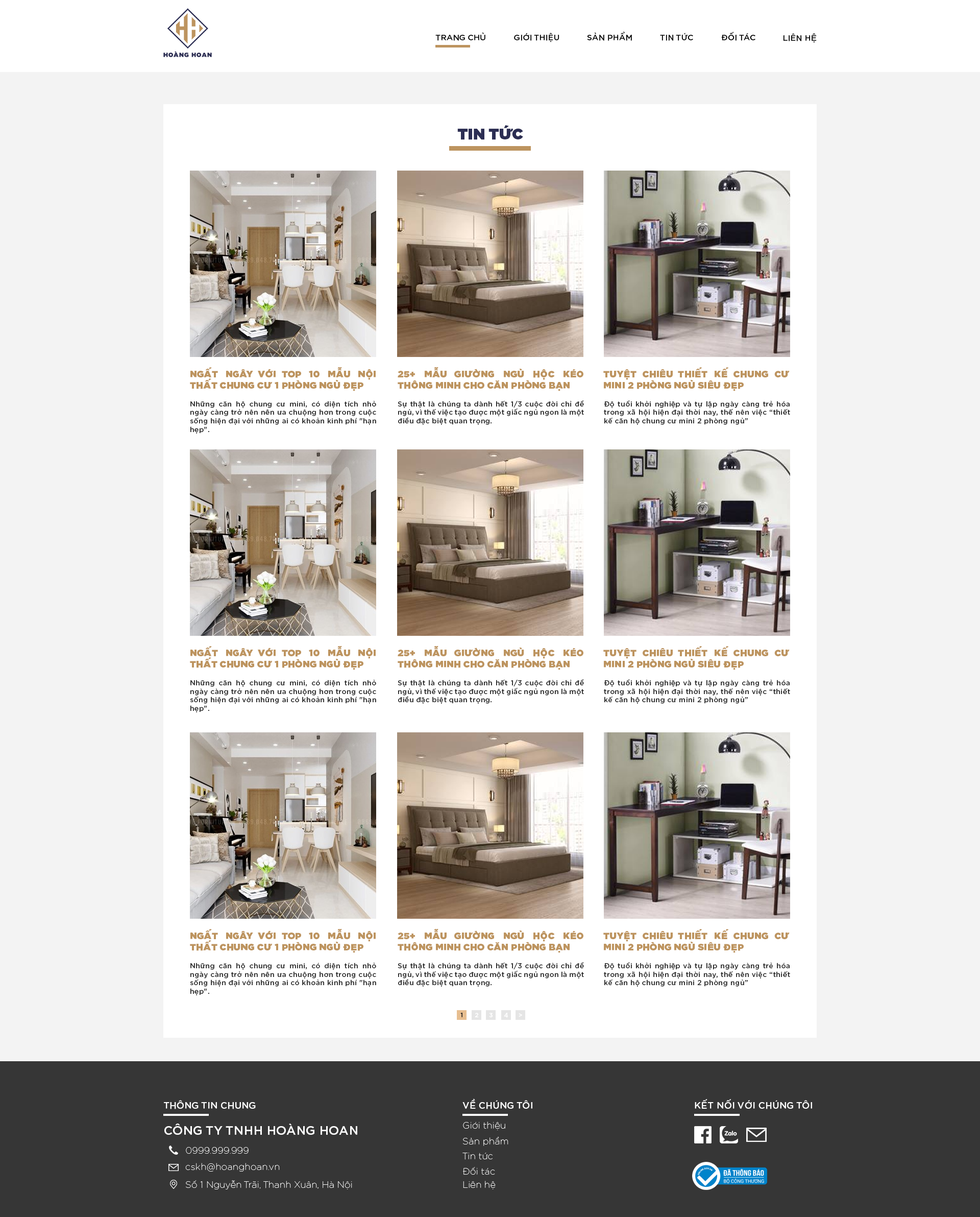
<style>
.page{position:relative;width:980px;height:1217px;background:#f3f3f3}
.page>*{position:absolute;margin:0}
.t1{font:8.2px "iCielGotham-Medium";color:#000000;text-transform:uppercase}
.t2{font:15.5px "iCielGotham-Ultra";letter-spacing:0.025em;color:#2c2e53;text-transform:uppercase}
.t3{font:9.2px "iCielGotham-Ultra";letter-spacing:0.025em;color:#bd945f}
.t4{font:7.1px "iCielGotham-Medium";letter-spacing:0.025em;color:#222222}
.t5{font:6.1px "iCielGotham-Medium";color:#222222}
.t6{font:6.1px "iCielGotham-Medium";color:#ffffff}
.t7{font:9.2px "iCielGotham-Medium";letter-spacing:0.025em;color:#ffffff}
.t8{font:9.2px "iCielGotham-Thin";letter-spacing:0.025em;color:#ffffff}
.t9{font:12.3px "iCielGotham-Medium";letter-spacing:0.025em;color:#ffffff}
</style>
<div class="page">
<p class="t1" style="left:435px;top:32px;width:50px;height:9px">trang chủ</p>
<p class="t1" style="left:514px;top:33px;width:46px;height:9px">gIớI thIệu</p>
<p class="t1" style="left:587px;top:32px;width:45px;height:9px">sản phẩm</p>
<p class="t1" style="left:660px;top:33px;width:33px;height:8px">tIn tức</p>
<p class="t1" style="left:721px;top:32px;width:35px;height:9px">đốI tác</p>
<p class="t1" style="left:783px;top:33px;width:34px;height:10px">lIên hệ</p>
<p class="t2" style="left:457px;top:125px;width:66px;height:15px">tIn tức</p>
<p class="t3" style="left:190px;top:367px;width:186px;height:24px;text-align:justify">NGẤT NGÂY VỚI TOP 10 MẪU NỘI THẤT CHUNG CƯ 1 PHÒNG NGỦ ĐẸP</p>
<p class="t3" style="left:398px;top:367px;width:186px;height:24px;text-align:justify">25+ MẪU GIƯỜNG NGỦ HỘC KÉO THÔNG MINH CHO CĂN PHÒNG BẠN</p>
<p class="t3" style="left:603px;top:367px;width:187px;height:24px;text-align:justify">TUYỆT CHIÊU THIẾT KẾ CHUNG CƯ MINI 2 PHÒNG NGỦ SIÊU ĐẸP</p>
<p class="t4" style="left:190px;top:401px;width:186px;height:32px;text-align:justify">Những căn hộ chung cư mini, có diện tích nhỏ ngày càng trở nên nên ưa chuộng hơn trong cuộc sống hiện đại với những ai có khoản kinh phí "hạn hẹp".</p>
<p class="t4" style="left:398px;top:400px;width:186px;height:25px;text-align:justify">Sự thật là chúng ta dành hết 1/3 cuộc đời chỉ để ngủ, vì thế việc tạo được một giấc ngủ ngon là một điều đặc biệt quan trọng.</p>
<p class="t4" style="left:604px;top:400px;width:186px;height:25px;text-align:justify">Độ tuổi khởi nghiệp và tự lập ngày càng trẻ hóa trong xã hội hiện đại thời nay, thế nên việc “thiết kế căn hộ chung cư mini 2 phòng ngủ”</p>
<p class="t3" style="left:190px;top:645px;width:186px;height:25px;text-align:justify">NGẤT NGÂY VỚI TOP 10 MẪU NỘI THẤT CHUNG CƯ 1 PHÒNG NGỦ ĐẸP</p>
<p class="t3" style="left:398px;top:645px;width:186px;height:25px;text-align:justify">25+ MẪU GIƯỜNG NGỦ HỘC KÉO THÔNG MINH CHO CĂN PHÒNG BẠN</p>
<p class="t3" style="left:603px;top:646px;width:187px;height:24px;text-align:justify">TUYỆT CHIÊU THIẾT KẾ CHUNG CƯ MINI 2 PHÒNG NGỦ SIÊU ĐẸP</p>
<p class="t4" style="left:190px;top:679px;width:186px;height:33px;text-align:justify">Những căn hộ chung cư mini, có diện tích nhỏ ngày càng trở nên nên ưa chuộng hơn trong cuộc sống hiện đại với những ai có khoản kinh phí "hạn hẹp".</p>
<p class="t4" style="left:398px;top:679px;width:186px;height:24px;text-align:justify">Sự thật là chúng ta dành hết 1/3 cuộc đời chỉ để ngủ, vì thế việc tạo được một giấc ngủ ngon là một điều đặc biệt quan trọng.</p>
<p class="t4" style="left:604px;top:679px;width:186px;height:24px;text-align:justify">Độ tuổi khởi nghiệp và tự lập ngày càng trẻ hóa trong xã hội hiện đại thời nay, thế nên việc “thiết kế căn hộ chung cư mini 2 phòng ngủ”</p>
<p class="t3" style="left:190px;top:928px;width:186px;height:25px;text-align:justify">NGẤT NGÂY VỚI TOP 10 MẪU NỘI THẤT CHUNG CƯ 1 PHÒNG NGỦ ĐẸP</p>
<p class="t3" style="left:398px;top:928px;width:186px;height:25px;text-align:justify">25+ MẪU GIƯỜNG NGỦ HỘC KÉO THÔNG MINH CHO CĂN PHÒNG BẠN</p>
<p class="t3" style="left:603px;top:929px;width:187px;height:24px;text-align:justify">TUYỆT CHIÊU THIẾT KẾ CHUNG CƯ MINI 2 PHÒNG NGỦ SIÊU ĐẸP</p>
<p class="t4" style="left:190px;top:962px;width:186px;height:33px;text-align:justify">Những căn hộ chung cư mini, có diện tích nhỏ ngày càng trở nên nên ưa chuộng hơn trong cuộc sống hiện đại với những ai có khoản kinh phí "hạn hẹp".</p>
<p class="t4" style="left:398px;top:962px;width:186px;height:24px;text-align:justify">Sự thật là chúng ta dành hết 1/3 cuộc đời chỉ để ngủ, vì thế việc tạo được một giấc ngủ ngon là một điều đặc biệt quan trọng.</p>
<p class="t4" style="left:604px;top:962px;width:186px;height:24px;text-align:justify">Độ tuổi khởi nghiệp và tự lập ngày càng trẻ hóa trong xã hội hiện đại thời nay, thế nên việc “thiết kế căn hộ chung cư mini 2 phòng ngủ”</p>
<p class="t5" style="left:460px;top:1012px;width:3px;height:5px">1</p>
<p class="t6" style="left:475px;top:1012px;width:4px;height:5px">2</p>
<p class="t6" style="left:489px;top:1012px;width:4px;height:5px">3</p>
<p class="t6" style="left:504px;top:1012px;width:4px;height:5px">4</p>
<p class="t6" style="left:519px;top:1013px;width:3px;height:3px">&gt;</p>
<p class="t7" style="left:164px;top:1100px;width:92px;height:9px">THÔNG TIN CHUNG</p>
<p class="t7" style="left:463px;top:1098px;width:69px;height:11px">VỀ CHÚNG TÔI</p>
<p class="t7" style="left:695px;top:1099px;width:117px;height:10px">KẾT NỐI VỚI CHÚNG TÔI</p>
<p class="t8" style="left:463px;top:1121px;width:42px;height:9px">Giới thiệu</p>
<p class="t9" style="left:164px;top:1123px;width:193px;height:11px">CÔNG TY TNHH HOÀNG HOAN</p>
<p class="t8" style="left:463px;top:1136px;width:45px;height:10px">Sản phẩm</p>
<p class="t8" style="left:186px;top:1147px;width:63px;height:6px">0999.999.999</p>
<p class="t8" style="left:463px;top:1152px;width:30px;height:7px">Tin tức</p>
<p class="t8" style="left:185px;top:1162px;width:95px;height:9px">cskh@hoanghoan.vn</p>
<p class="t8" style="left:463px;top:1167px;width:32px;height:7px">Đối tác</p>
<p class="t8" style="left:186px;top:1180px;width:166px;height:9px">Số 1 Nguyễn Trãi, Thanh Xuân, Hà Nội</p>
<p class="t8" style="left:463px;top:1180px;width:33px;height:9px">Liên hệ</p>
</div>
